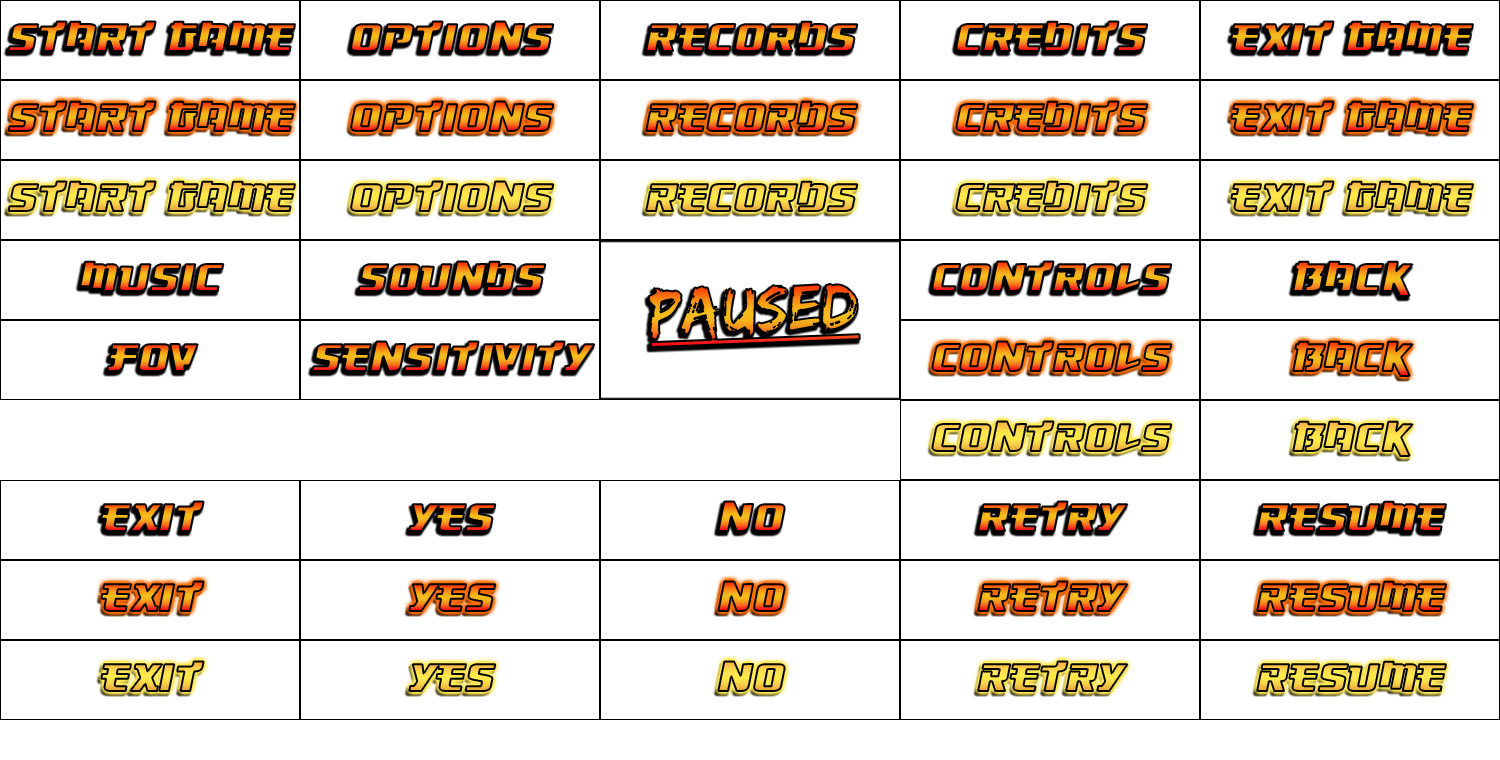
<style>
.page{position:relative;width:1500px;height:760px;background:#ffffff}
.page>*{position:absolute;margin:0}
.t1{font:50px "Osaka-SansSerif"}
.t2{font:66.7px "EdoSZ";text-decoration:underline}
</style>
<div class="page">
<p class="t1" style="left:8px;top:21px;width:287px;height:30px">Start Game</p>
<p class="t1" style="left:351px;top:21px;width:203px;height:30px">options</p>
<p class="t1" style="left:646px;top:21px;width:212px;height:30px">records</p>
<p class="t1" style="left:956px;top:21px;width:192px;height:30px">Credits</p>
<p class="t1" style="left:1231px;top:21px;width:242px;height:30px">Exit Game</p>
<p class="t1" style="left:80px;top:261px;width:144px;height:30px">Music</p>
<p class="t1" style="left:358px;top:261px;width:188px;height:30px">Sounds</p>
<p class="t1" style="left:932px;top:261px;width:240px;height:30px">Controls</p>
<p class="t1" style="left:1293px;top:261px;width:120px;height:35px">Back</p>
<p class="t2" style="left:648px;top:284px;width:212px;height:64px;rotate:-2deg">Paused</p>
<p class="t1" style="left:312px;top:341px;width:283px;height:30px">Sensitivity</p>
<p class="t1" style="left:107px;top:344px;width:91px;height:27px">FOV</p>
<p class="t1" style="left:101px;top:501px;width:103px;height:30px">Exit</p>
<p class="t1" style="left:409px;top:504px;width:87px;height:27px">Yes</p>
<p class="t1" style="left:718px;top:501px;width:67px;height:30px">NO</p>
<p class="t1" style="left:978px;top:501px;width:150px;height:30px">Retry</p>
<p class="t1" style="left:1257px;top:501px;width:189px;height:30px">Resume</p>
<p class="t1" style="left:101px;top:661px;width:103px;height:30px">Exit</p>
</div>
